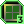
<style>
.page{position:relative;width:24px;height:24px;background:#24681b}
.page>*{position:absolute;margin:0}
.t1{font:9px "Montserrat-Bold";color:#000000}
</style>
<div class="page">
<p class="t1" style="left:17px;top:16px;width:6px;height:7px">3</p>
</div>
